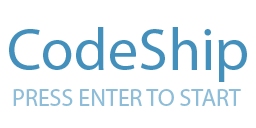
<style>
.page{position:relative;width:256px;height:128px;background:#ffffff}
.page>*{position:absolute;margin:0}
.t1{font:60px "MyriadPro-Regular";color:#4390bc}
.t2{font:24px "MyriadPro-Regular";color:#8dbdd8}
</style>
<div class="page">
<p class="t1" style="left:9px;top:27px;width:238px;height:55px">CodeShip</p>
<p class="t2" style="left:13px;top:89px;width:228px;height:17px">PRESS ENTER TO START</p>
</div>
